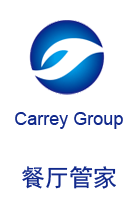
<style>
.page{position:relative;width:136px;height:216px;background:#ffffff}
.page>*{position:absolute;margin:0}
.t1{font:18px "ArialMT";color:#11298c}
.t2{font:24px "SimHei";color:#11298c}
</style>
<div class="page">
<p class="t1" style="left:15px;top:112px;width:108px;height:17px">Carrey Group</p>
<p class="t2" style="left:22px;top:166px;width:94px;height:23px">餐厅管家</p>
</div>
